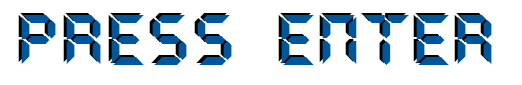
<style>
.page{position:relative;width:522px;height:85px;background:#ffffff}
.page>*{position:absolute;margin:0}
.t1{font:72px "QuartzMS"}
.t2{font:72px "QuartzMS";color:#00569a}
</style>
<div class="page">
<p class="t1" style="left:18px;top:13px;width:471px;height:50px">Press  enter</p>
<p class="t2" style="left:21px;top:15px;width:471px;height:50px">Press  enter</p>
</div>
